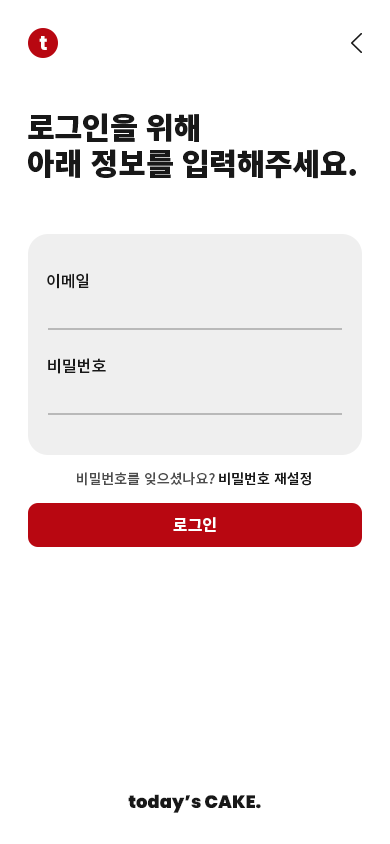
<style>
.page{position:relative;width:390px;height:844px;background:#ffffff}
.page>*{position:absolute;margin:0}
.t1{font:20px "Poppins-Bold";color:#ffffff}
.t2{font:30px/36px "NotoSansKR-Black";color:#181818}
.t3{font:16px "NotoSansKR-Medium";color:#181818}
.t4{font:14px "NotoSansKR-Medium";color:#4d4d4d}
.t5{font:14px "NotoSansKR-Bold";color:#181818}
.t6{font:16px "NotoSansKR-Bold";color:#ffffff}
.t7{font:18px "Poppins-Black";color:#181818}
</style>
<div class="page">
<p class="t1" style="left:39px;top:36px;width:8px;height:14px">t</p>
<p class="t2" style="left:28px;top:113px;width:328px;height:66px">로그인을 위해<br>아래 정보를 입력해주세요.</p>
<p class="t3" style="left:47px;top:273px;width:42px;height:16px">이메일</p>
<p class="t3" style="left:48px;top:358px;width:58px;height:16px">비밀번호</p>
<p class="t4" style="left:77px;top:472px;width:234px;height:14px">비밀번호를 잊으셨나요? <span class="t5">비밀번호 재설정</span></p>
<p class="t6" style="left:173px;top:517px;width:43px;height:15px">로그인</p>
<p class="t7" style="left:128px;top:794px;width:133px;height:19px">today’s CAKE.</p>
</div>
